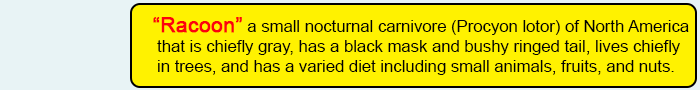
<style>
.page{position:relative;width:700px;height:90px;background:#fff200}
.page>*{position:absolute;margin:0}
.t1{font:16.7px "ArialMT";color:#020202}
.t2{font:20.8px "ArialMT";color:#fd010d;font-weight:bold}
</style>
<div class="page">
<p class="t1" style="left:153px;top:17px;width:536px;height:58px"><span class="t2">“Racoon”</span> a small nocturnal carnivore (Procyon lotor) of North America<br> that is chiefly gray, has a black mask and bushy ringed tail, lives chiefly <br> in trees, and has a varied diet including small animals, fruits, and nuts.</p>
</div>
